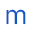
<style>
.page{position:relative;width:32px;height:32px;background:#ffffff}
.page>*{position:absolute;margin:0}
.t1{font:25px "Galvji";color:#0f57c4}
</style>
<div class="page">
<p class="t1" style="left:6px;top:9px;width:20px;height:16px">m</p>
</div>
